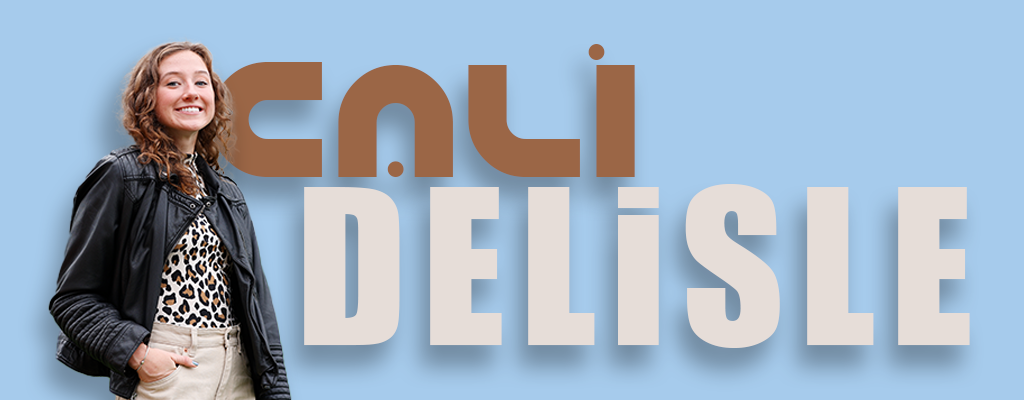
<style>
.page{position:relative;width:1024px;height:400px;background:#a6cbec}
.page>*{position:absolute;margin:0}
.t1{font:178.5px "Eco";letter-spacing:0.075em;color:#9b6646}
.t2{font:200px "Impact";letter-spacing:0.075em;color:#e6ddd8}
</style>
<div class="page">
<p class="t1" style="left:210px;top:44px;width:425px;height:133px">CALi</p>
<p class="t2" style="left:304px;top:184px;width:666px;height:164px">DELiSLE</p>
</div>
